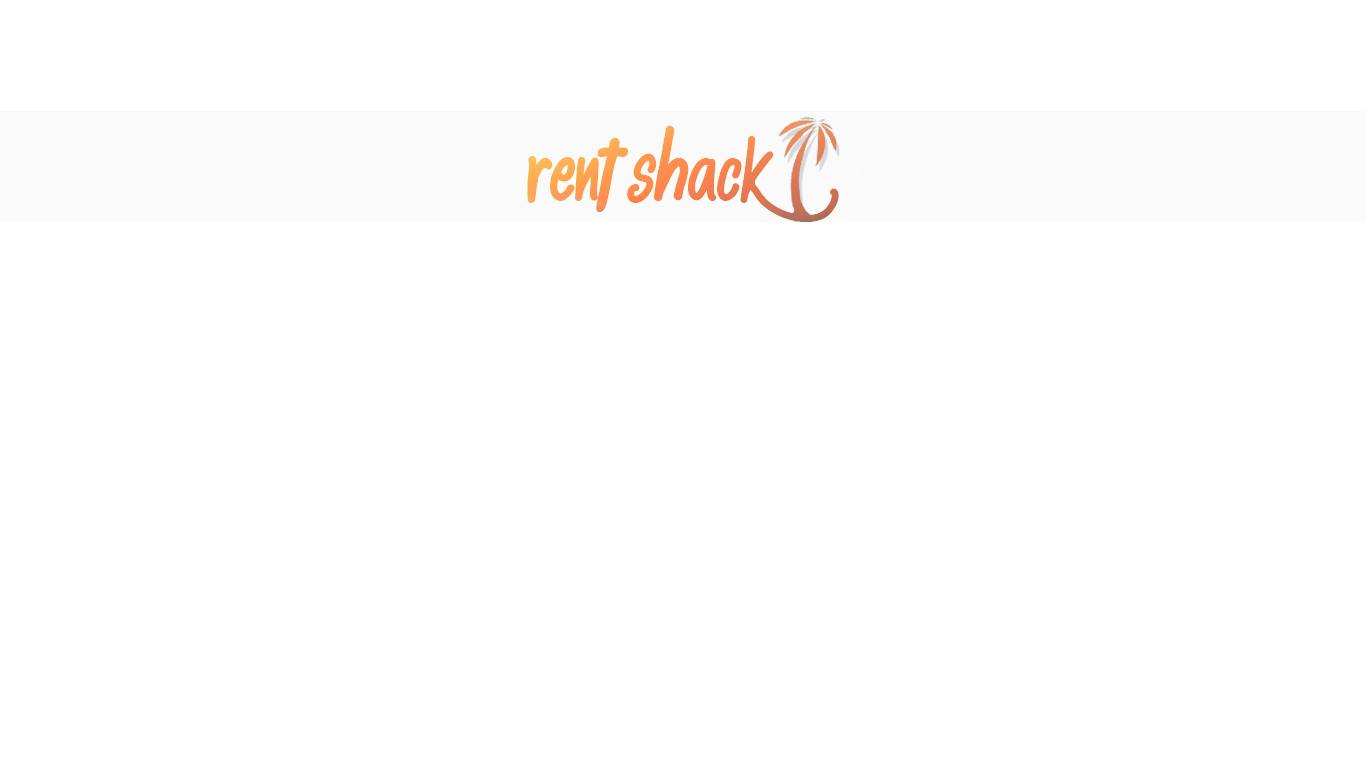
<style>
.page{position:relative;width:1366px;height:768px;background:#ffffff}
.page>*{position:absolute;margin:0}
.t1{font:48px "alkisah"}
</style>
<div class="page">
<p class="t1" style="left:527px;top:126px;width:312px;height:96px">Rent Shack</p>
</div>
